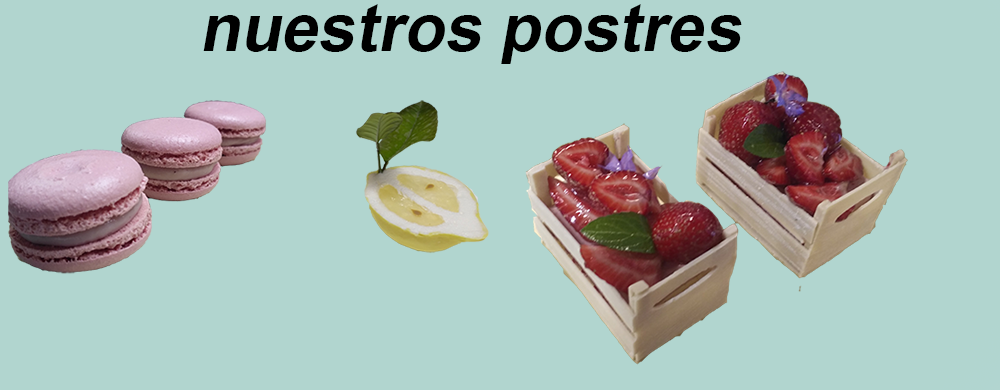
<style>
.page{position:relative;width:1000px;height:390px;background:#b1d5cf}
.page>*{position:absolute;margin:0}
.t1{font:66.8px "Arial-BoldMT";color:#000000;font-style:italic}
</style>
<div class="page">
<p class="t1" style="left:203px;top:4px;width:539px;height:60px">nuestros postres</p>
</div>
